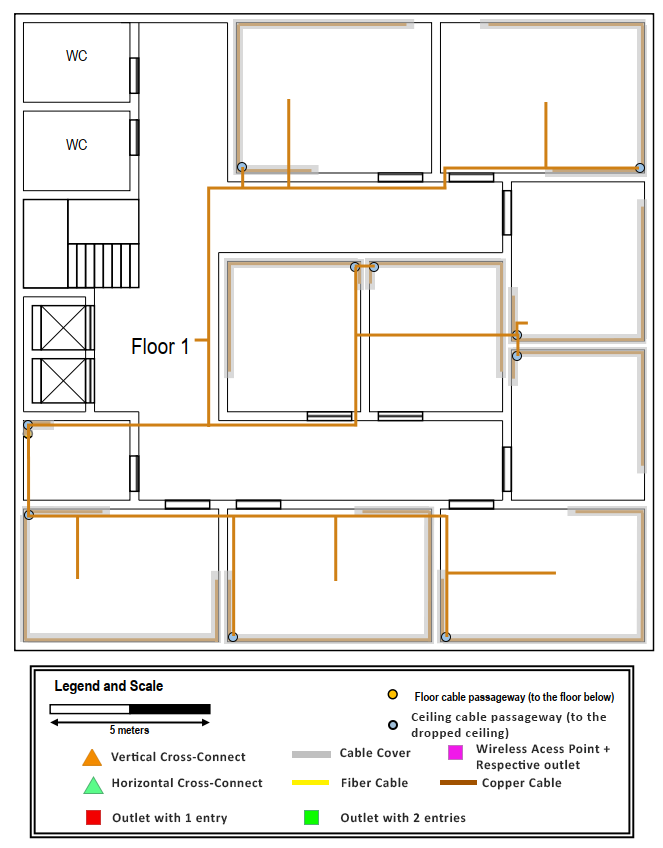
<style>
.page{position:relative;width:663px;height:848px;background:#ffffff}
.page>*{position:absolute;margin:0}
.t1{font:13.3px "Calibri-Bold";letter-spacing:0.04em;color:#282828}
.t2{font:13.4px "Calibri-Bold";letter-spacing:0.04em;color:#282828}
.t3{font:13.2px "Calibri-Bold";letter-spacing:0.04em;color:#282828}
</style>
<div class="page">
<p class="t1" style="left:411px;top:712px;width:196px;height:27px">Ceiling cable passageway (to the <br>dropped ceiling)</p>
<p class="t2" style="left:340px;top:747px;width:71px;height:11px">Cable Cover</p>
<p class="t2" style="left:476px;top:743px;width:134px;height:29px">Wireless Acess Point + <br>Respective outlet</p>
<p class="t2" style="left:111px;top:751px;width:135px;height:11px">Vertical Cross-Connect</p>
<p class="t3" style="left:112px;top:778px;width:151px;height:10px">Horizontal Cross-Connect</p>
<p class="t2" style="left:341px;top:777px;width:67px;height:11px">Fiber Cable</p>
<p class="t2" style="left:482px;top:777px;width:80px;height:13px">Copper Cable</p>
<p class="t2" style="left:112px;top:812px;width:115px;height:13px">Outlet with 1 entry</p>
<p class="t2" style="left:340px;top:812px;width:126px;height:11px">Outlet with 2 entries</p>
</div>
